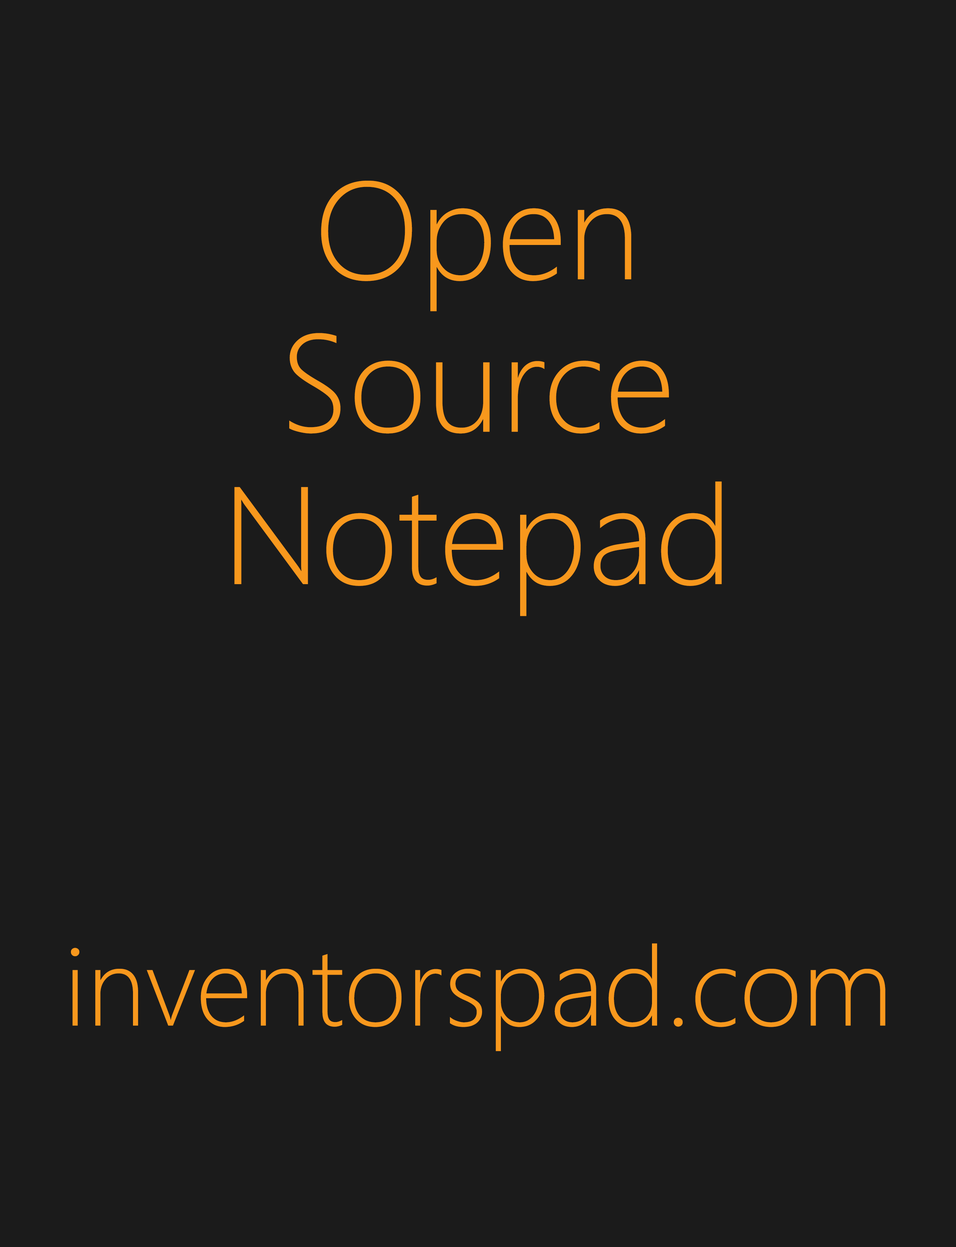
<style>
.page{position:relative;width:956px;height:1247px;background:#1b1b1b}
.page>*{position:absolute;margin:0}
.t1{font:138.6px/27.7px "SegoeUI-Light";color:#f8981d}
.t2{font:110.8px "SegoeUI-Light";color:#f8981d}
</style>
<div class="page">
<p class="t1" style="left:234px;top:181px;width:488px;height:435px;text-align:center">Open<br><br><br>Source<br><br><br>Notepad</p>
<p class="t2" style="left:71px;top:943px;width:815px;height:108px">inventorspad.com</p>
</div>
